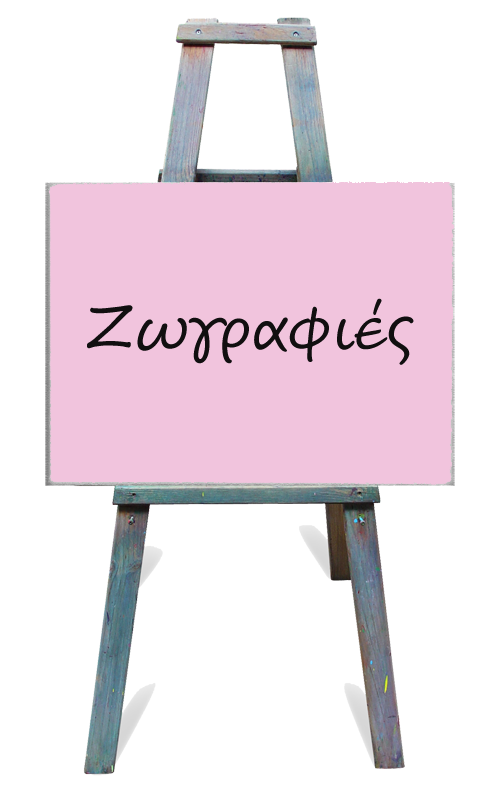
<style>
.page{position:relative;width:500px;height:790px;background:#ffffff}
.page>*{position:absolute;margin:0}
.t1{font:60px "SegoeScript";color:#110f10}
</style>
<div class="page">
<p class="t1" style="left:87px;top:298px;width:327px;height:67px">Ζωγραφιές</p>
</div>
